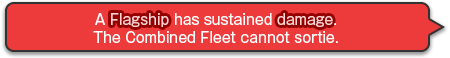
<style>
.page{position:relative;width:450px;height:58px;background:#ed3b3b}
.page>*{position:absolute;margin:0}
.t1{font:14px/18px "GothicMB101Pro-Regular";color:#ffffff}
.t2{font:14px/18px "GothicMB101Pro-Regular";color:#ffd3d3}
</style>
<div class="page">
<p class="t1" style="left:93px;top:13px;width:245px;height:30px;text-align:center">A <span class="t2">Flagship</span> has sustained <span class="t2">damage</span>.<br>The Combined Fleet cannot sortie.</p>
<p class="t1" style="left:93px;top:13px;width:245px;height:30px;text-align:center">A <span class="t2">Flagship</span> has sustained <span class="t2">damage</span>.<br>The Combined Fleet cannot sortie.</p>
</div>
